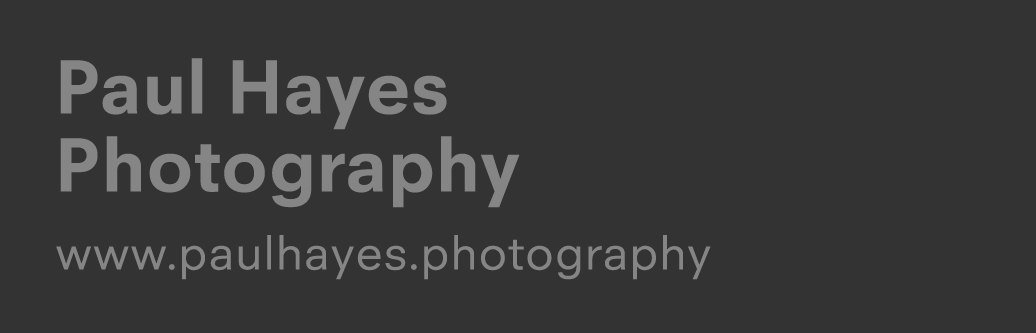
<style>
.page{position:relative;width:1036px;height:333px;background:#333333}
.page>*{position:absolute;margin:0}
.t1{font:48.7px/78px "NeuzeitOffice-Regular";color:#858585}
.t2{font:78px/78px "NeuzeitOffice-Bold";color:#858585}
</style>
<div class="page">
<p class="t1" style="left:56px;top:58px;width:655px;height:222px"><span class="t2">Paul Hayes<br>Photography<br></span>www.paulhayes.photography</p>
</div>
